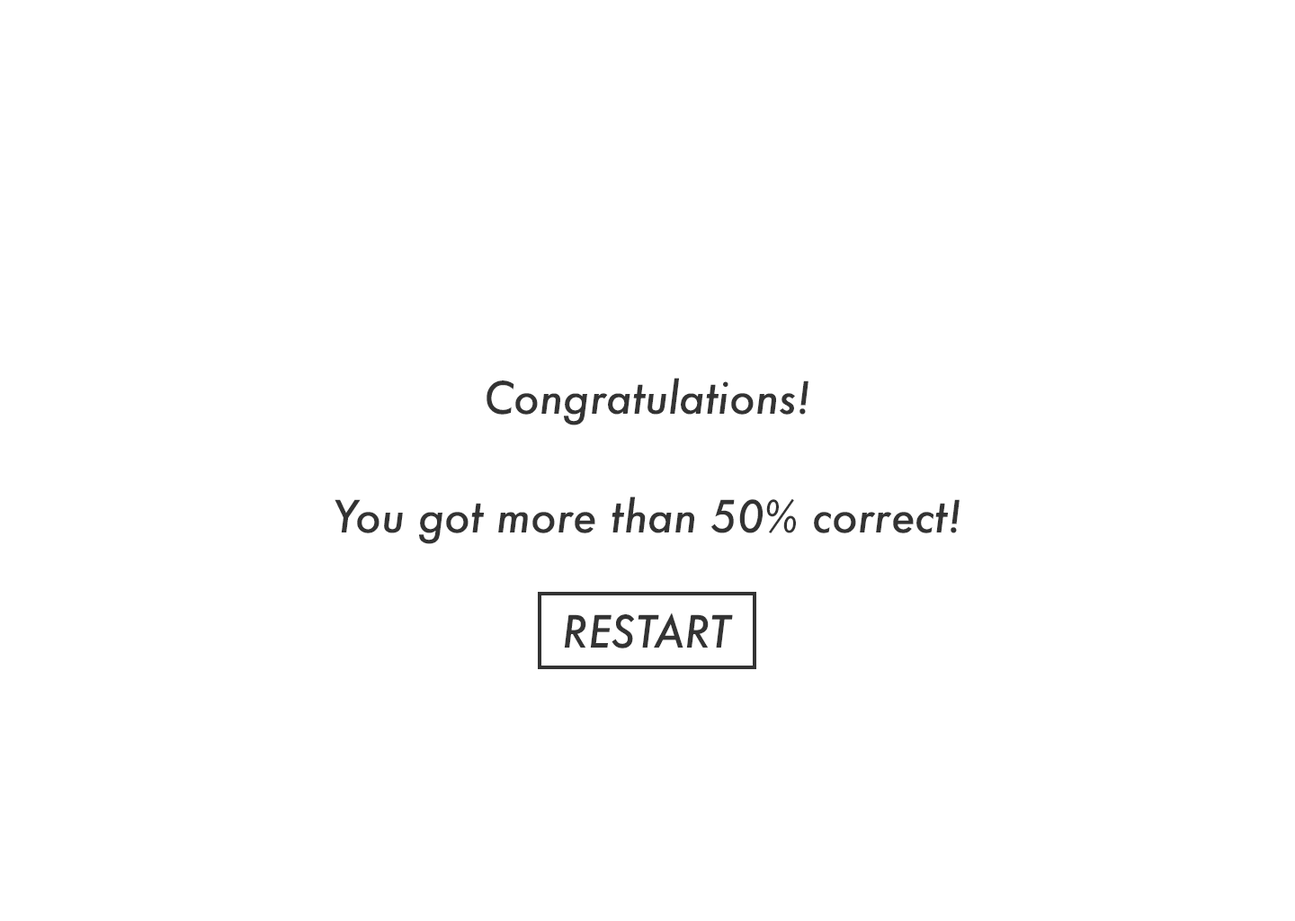
<style>
.page{position:relative;width:1295px;height:921px;background:#ffffff}
.page>*{position:absolute;margin:0}
.t1{font:43.2px "Futura-MediumItalic";color:#333333}
</style>
<div class="page">
<p class="t1" style="left:487px;top:378px;width:321px;height:47px">Congratulations!</p>
<p class="t1" style="left:335px;top:496px;width:625px;height:48px">You got more than 50% correct!</p>
<p class="t1" style="left:564px;top:612px;width:169px;height:36px">RESTART</p>
</div>
